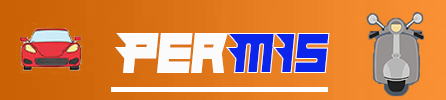
<style>
.page{position:relative;width:446px;height:100px}
.page>*{position:absolute;margin:0}
.t1{font:58.3px "Hindsight2020";color:#fbfbfb;scale:0.92 1}
.t2{font:58.3px "Hindsight2020";color:#0b25eb;scale:0.92 1}
</style>
<div class="page">
<p class="t1" style="left:115px;top:33px;width:113px;height:40px">Per</p>
<p class="t2" style="left:226px;top:33px;width:104px;height:40px">MIs</p>
</div>
